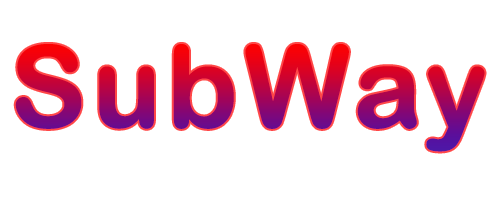
<style>
.page{position:relative;width:500px;height:200px;background:#ffffff}
.page>*{position:absolute;margin:0}
.t1{font:113.8px "ArialRoundedMTBold";letter-spacing:0.025em;font-weight:bold}
</style>
<div class="page">
<p class="t1" style="left:15px;top:44px;width:470px;height:108px">SubWay</p>
</div>
